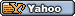
<style>
.page{position:relative;width:75px;height:16px}
.page>*{position:absolute;margin:0}
.t1{font:10px "Arial-Black";color:#ffffff}
</style>
<div class="page">
<p class="t1" style="left:27px;top:4px;width:34px;height:8px">Yahoo</p>
</div>
